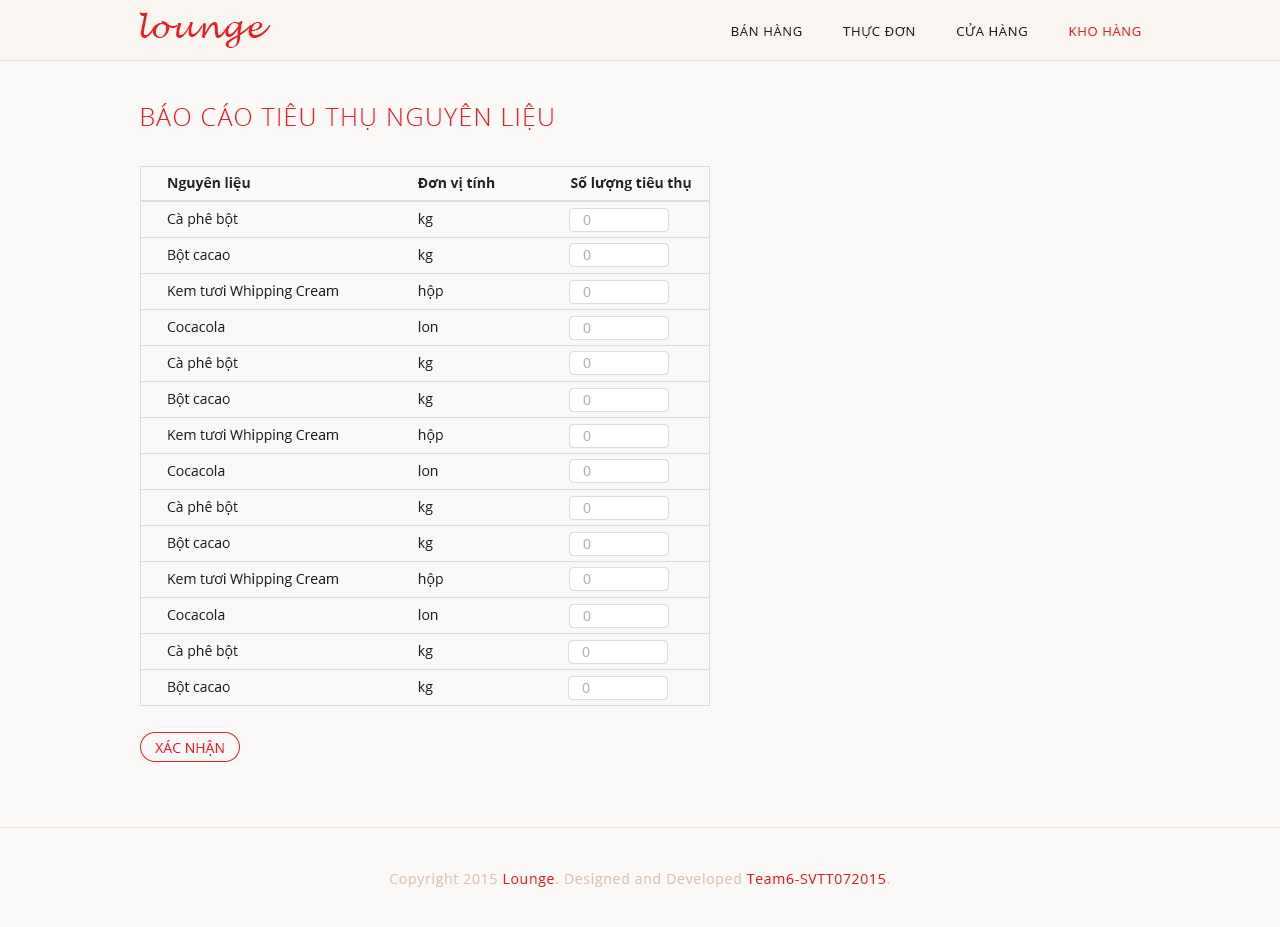
<style>
.page{position:relative;width:1280px;height:927px;background:#fbf9f7}
.page>*{position:absolute;margin:0}
.t1{font:30px "LucidaHandwriting-Italic";letter-spacing:0.05em;color:#ea1d24}
.t2{font:13px "OpenSans";letter-spacing:0.05em;color:#222222}
.t3{font:13px "OpenSans";letter-spacing:0.05em;color:#ea1d24}
.t4{font:25px "OpenSans-Light";letter-spacing:0.05em;color:#ea1d24}
.t5{font:14px/36px "OpenSans";color:#222222}
.t6{font:14px/36px "OpenSans-Bold";color:#222222}
.t7{font:14px "OpenSans";color:#ea1d24}
.t8{font:14px "OpenSans";letter-spacing:0.05em;color:#dac3b4}
.t9{font:14px "OpenSans";letter-spacing:0.05em;color:#ea1b23}
</style>
<div class="page">
<p class="t1" style="left:139px;top:12px;width:132px;height:36px">lounge</p>
<p class="t2" style="left:731px;top:23px;width:410px;height:15px">BÁN HÀNG          THỰC ĐƠN          CỬA HÀNG          <span class="t3">KHO HÀNG</span></p>
<p class="t4" style="left:141px;top:103px;width:412px;height:27px">BÁO CÁO TIÊU THỤ NGUYÊN LIỆU</p>
<p class="t5" style="left:167px;top:176px;width:524px;height:519px"><span class="t6">Nguyên liệu                                                                                        Số lượng tiêu thụ<br></span>Cà phê bột                                           <br>Bột cacao                                               <br>Kem tươi Whipping Cream                  <br>Cocacola                                                 <br>Cà phê bột                                             <br>Bột cacao                                                <br>Kem tươi Whipping Cream                  <br>Cocacola<br>Cà phê bột                                           <br>Bột cacao                                               <br>Kem tươi Whipping Cream                  <br>Cocacola                                                 <br>Cà phê bột                                             <br>Bột cacao</p>
<p class="t5" style="left:418px;top:177px;width:77px;height:518px"><span class="t6">Đơn vị tính<br></span>kg<br>kg<br>hộp<br>lon<br>kg<br>kg<br>hộp<br>lon<br>kg<br>kg<br>hộp<br>lon<br>kg<br>kg</p>
<p class="t7" style="left:155px;top:740px;width:69px;height:16px">XÁC NHẬN</p>
<p class="t8" style="left:390px;top:873px;width:500px;height:14px">Copyright 2015 <span class="t9">Lounge</span>. Designed and Developed <span class="t9">Team6-SVTT072015</span>.</p>
</div>
